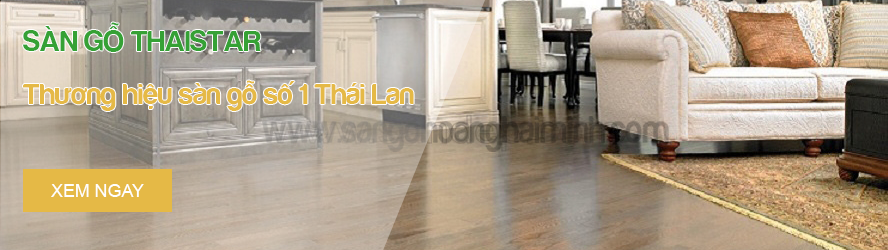
<style>
.page{position:relative;width:888px;height:250px}
.page>*{position:absolute;margin:0}
.t1{font:30px "FS-Harabara";color:#35a135}
.t2{font:30px "FS-Harabara";color:#e5b946}
.t3{font:17.8px "ArialMT";color:#ffffff}
</style>
<div class="page">
<p class="t1" style="left:23px;top:22px;width:238px;height:30px">SÀN GỖ THAISTAR</p>
<p class="t2" style="left:23px;top:80px;width:391px;height:31px">Thương hiệu sàn gỗ số 1 Thái Lan</p>
<p class="t3" style="left:51px;top:184px;width:93px;height:13px">XEM NGAY</p>
</div>
